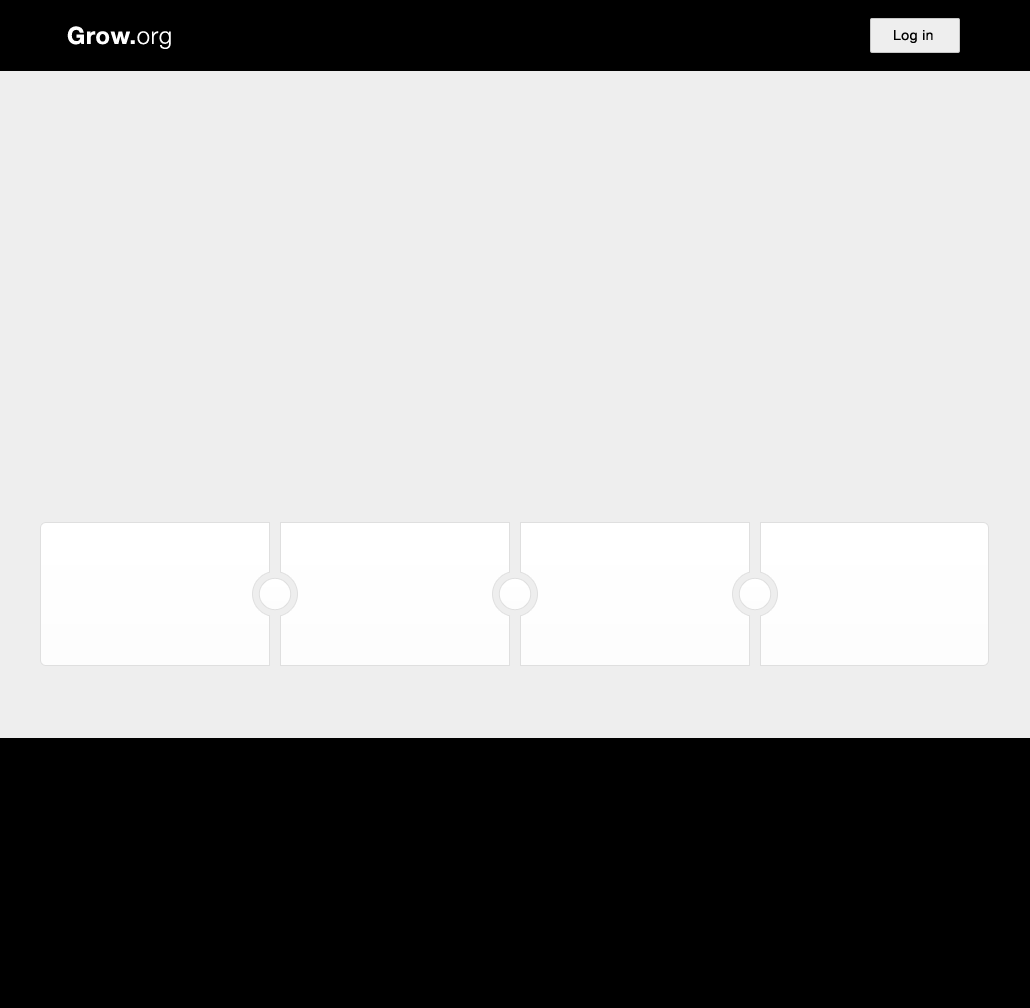
<style>
.page{position:relative;width:1030px;height:1008px;background:#eeeeee}
.page>*{position:absolute;margin:0}
.t1{font:24px "HelveticaNeue-Bold";letter-spacing:0.025em;color:#ffffff}
.t2{font:24px "HelveticaNeue-Light";letter-spacing:0.025em;color:#ffffff}
.t3{font:14px "HelveticaNeue";letter-spacing:0.025em;color:#000000}
</style>
<div class="page">
<p class="t1" style="left:67px;top:26px;width:104px;height:23px">Grow.<span class="t2">org</span></p>
<p class="t3" style="left:894px;top:30px;width:39px;height:13px">Log in</p>
</div>
